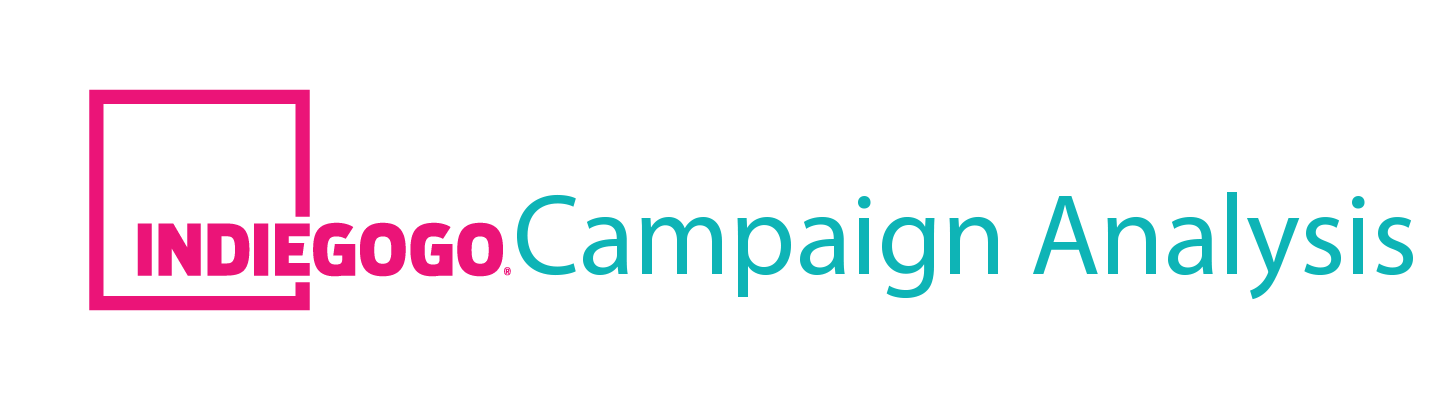
<style>
.page{position:relative;width:1456px;height:400px;background:#ffffff}
.page>*{position:absolute;margin:0}
.t1{font:115px "MyriadPro-Regular";color:#0eb4b6}
</style>
<div class="page">
<p class="t1" style="left:517px;top:192px;width:896px;height:108px">Campaign Analysis</p>
</div>
